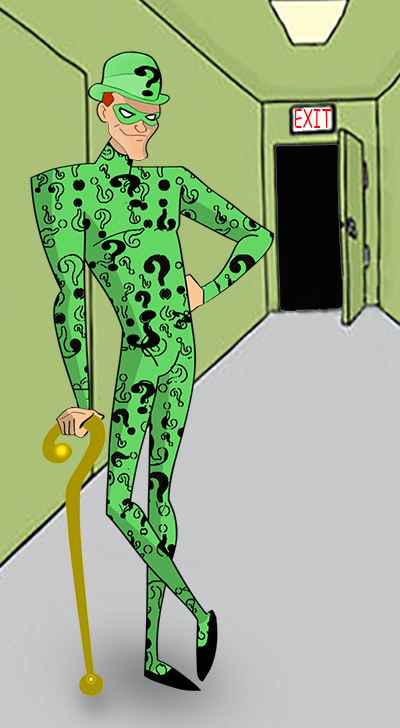
<style>
.page{position:relative;width:400px;height:728px;background:#c7c8ca}
.page>*{position:absolute;margin:0}
.t1{font:25px "ComicSansMS";color:#ff0000;scale:0.58 1}
</style>
<div class="page">
<p class="t1" style="left:294px;top:108px;width:38px;height:20px">EXIT</p>
</div>
